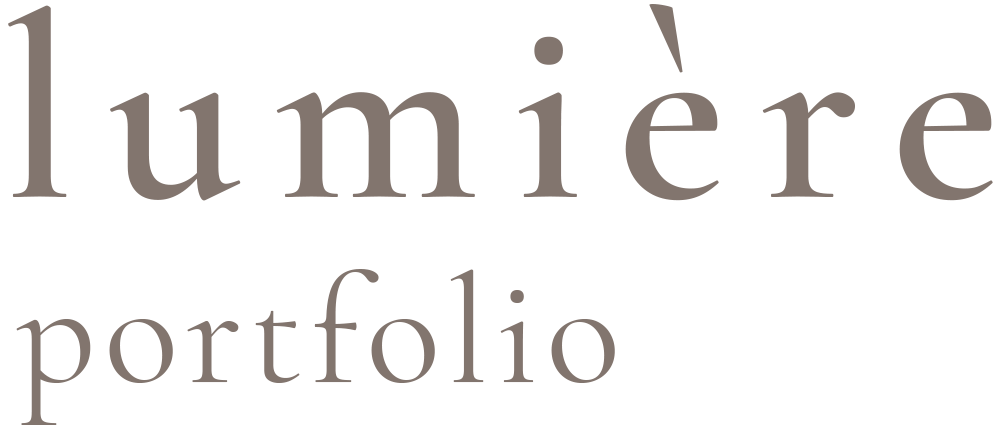
<style>
.page{position:relative;width:1000px;height:438px;background:#ffffff}
.page>*{position:absolute;margin:0}
.t1{font:264px "CormorantGaramond-SemiBold";letter-spacing:0.13em;color:#82756e}
.t2{font:155.2px "CormorantGaramond-Regular";letter-spacing:0.05em;color:#82756e}
</style>
<div class="page">
<p class="t1" style="left:8px;top:4px;width:985px;height:197px">lumière</p>
<p class="t2" style="left:16px;top:269px;width:599px;height:156px">portfolio</p>
</div>
